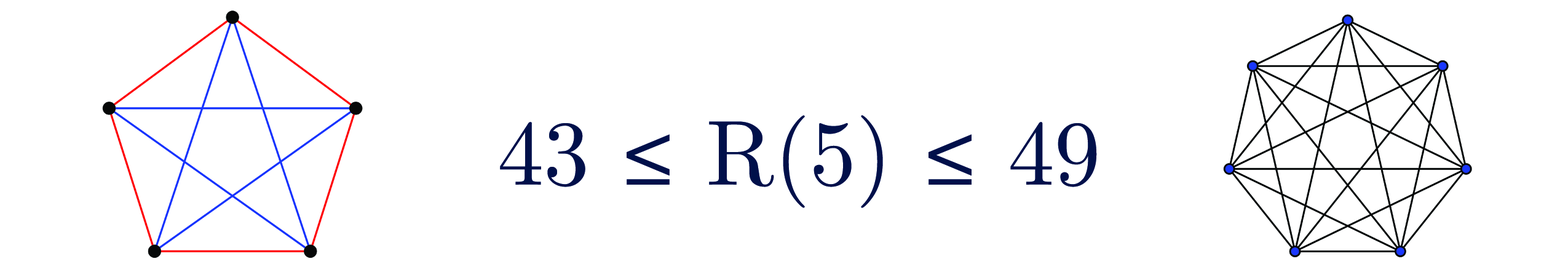
<style>
.page{position:relative;width:1568px;height:277px;background:#ffffff}
.page>*{position:absolute;margin:0}
.t1{font:92.2px "CMUSerif-Roman";color:#001049}
.t2{font:92.2px "MyriadPro-Regular";color:#001049}
</style>
<div class="page">
<p class="t1" style="left:500px;top:115px;width:597px;height:93px">43 <span class="t2">≤</span> R(5) <span class="t2">≤</span> 49</p>
</div>
